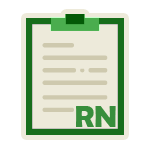
<style>
.page{position:relative;width:150px;height:150px;background:#ffffff}
.page>*{position:absolute;margin:0}
.t1{font:31.2px "BerlinSansFBDemi-Bold";color:#388e3c}
</style>
<div class="page">
<p class="t1" style="left:76px;top:106px;width:40px;height:21px">RN</p>
</div>
